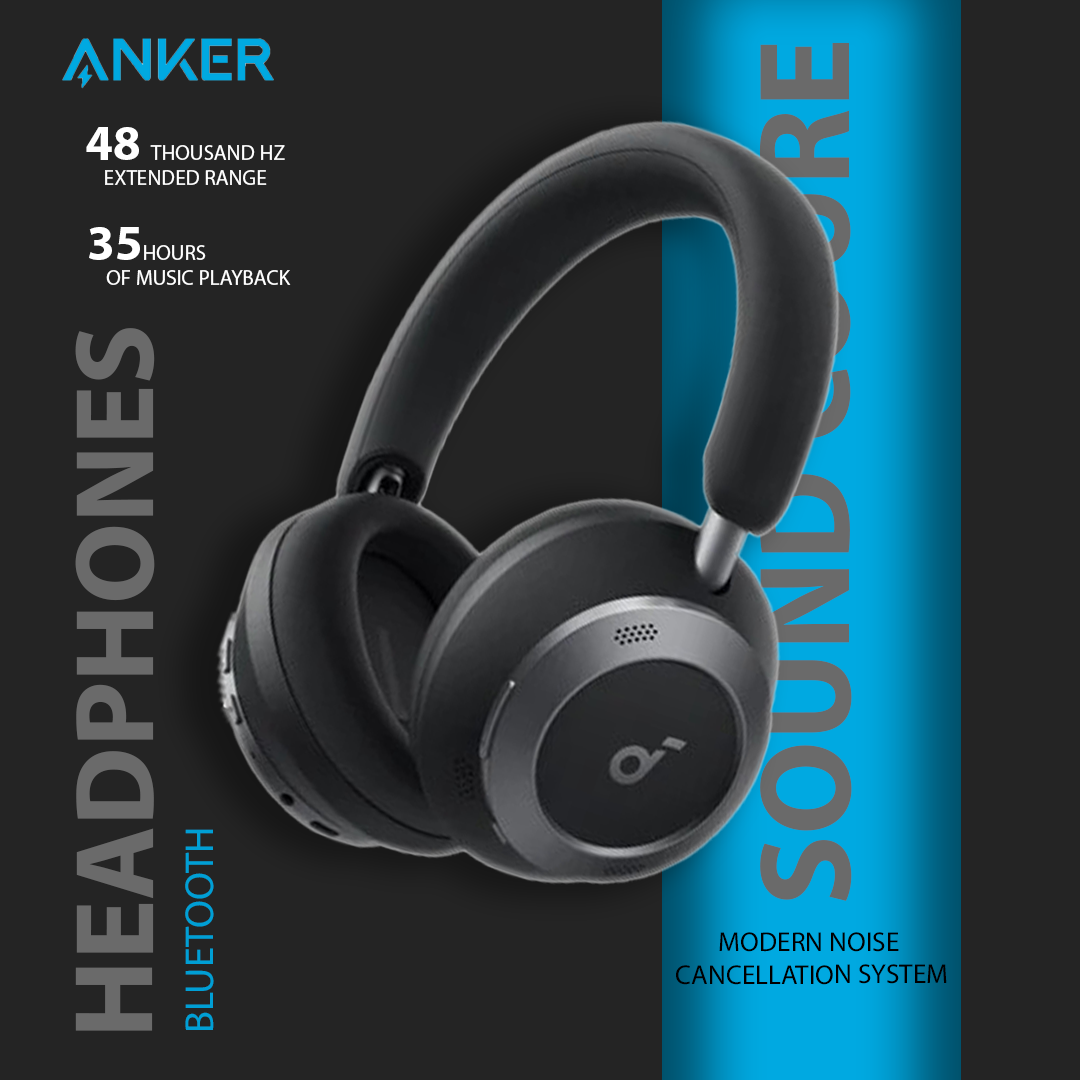
<style>
.page{position:relative;width:1080px;height:1080px;background:#242424}
.page>*{position:absolute;margin:0}
.t1{font:131.1px "MyriadPro-Bold";color:#6a6a6a;text-transform:uppercase}
.t2{font:21.2px "MyriadPro-Regular";color:#ffffff;text-transform:uppercase}
.t3{font:50px "MyriadPro-Bold";color:#ffffff;text-transform:uppercase}
.t4{font:112.9px "MyriadPro-Bold";color:#6a6a6a;text-transform:uppercase}
.t5{font:40.5px "MyriadPro-Regular";color:#009fd5;text-transform:uppercase}
.t6{font:27.3px "MyriadPro-Regular";color:#000000;text-transform:uppercase}
</style>
<div class="page">
<p class="t1" style="left:759px;top:42px;width:93px;height:859px;rotate:-90deg">sound coure</p>
<p class="t2" style="left:86px;top:127px;width:199px;height:58px;text-align:center"><span class="t3">48 </span>thousand Hz<br>extended range</p>
<p class="t2" style="left:89px;top:227px;width:202px;height:58px;text-align:center"><span class="t3">35</span>hours<br>                       of music playback</p>
<p class="t4" style="left:75px;top:328px;width:80px;height:703px;rotate:-90deg">HEADPHONES</p>
<p class="t5" style="left:185px;top:829px;width:29px;height:201px;rotate:-90deg">bluetooth</p>
<p class="t6" style="left:676px;top:932px;width:271px;height:53px;text-align:center">modern noise<br> cancellation system</p>
</div>
